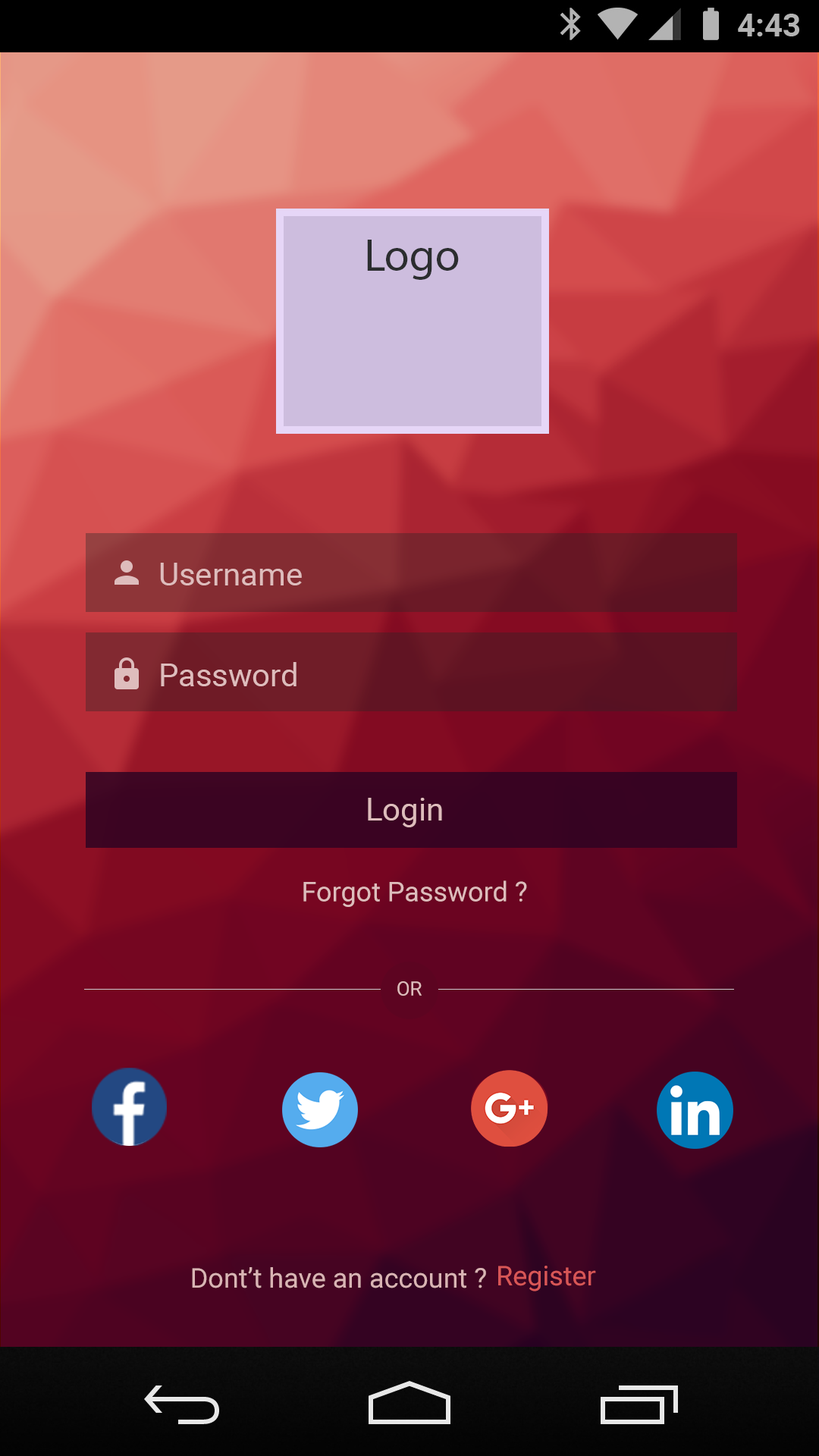
<style>
.page{position:relative;width:819px;height:1456px}
.page>*{position:absolute;margin:0}
.t1{font:45.5px "MyriadPro-Regular";color:#2b2d2f}
.t2{font:31.8px "Roboto-Regular";color:#debcbc}
.t3{font:27.3px "Roboto-Regular";color:#debcbc}
.t4{font:19.7px "Roboto-Regular";color:#debcbc}
.t5{font:27.3px "Roboto-Regular";color:#d85656}
.t6{font:27.3px "Roboto-Regular";color:#d9b4b4}
</style>
<div class="page">
<p class="t1" style="left:367px;top:240px;width:92px;height:40px">Logo</p>
<p class="t2" style="left:160px;top:563px;width:142px;height:22px">Username</p>
<p class="t2" style="left:161px;top:662px;width:136px;height:24px">Password</p>
<p class="t2" style="left:368px;top:798px;width:74px;height:29px">Login</p>
<p class="t3" style="left:303px;top:880px;width:224px;height:27px">Forgot Password ?</p>
<p class="t4" style="left:397px;top:981px;width:25px;height:15px">OR</p>
<p class="t5" style="left:498px;top:1266px;width:98px;height:25px">Register</p>
<p class="t6" style="left:192px;top:1267px;width:294px;height:21px">Dont’t have an account ?</p>
</div>
